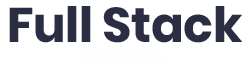
<style>
.page{position:relative;width:250px;height:70px;background:#ffffff}
.page>*{position:absolute;margin:0}
.t1{font:48.6px "Poppins-Bold";color:#2b2d42}
</style>
<div class="page">
<p class="t1" style="left:9px;top:6px;width:234px;height:37px">Full Stack</p>
</div>
